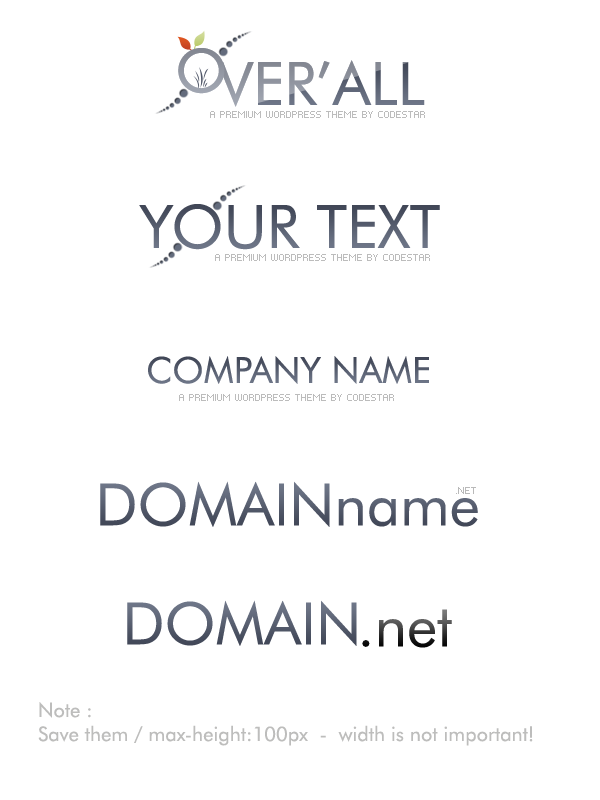
<style>
.page{position:relative;width:600px;height:800px;background:#ffffff}
.page>*{position:absolute;margin:0}
.t1{font:60px "FuturaBT-Book";color:#9296a1}
.t2{font:60px "FuturaBT-Book"}
.t3{font:8px "PFTempestaSeven";color:#bcbcbc}
.t4{font:60px "FuturaBT-Book";color:#545b6c}
.t5{font:36px "FuturaBT-Book";color:#585f70}
.t6{font:58.5px "FuturaBT-Book";color:#545b6c}
.t7{font:7.9px "PFTempestaSeven";color:#b9b9b9}
.t8{font:58.5px "FuturaBT-Book";color:#575e6f}
.t9{font:58.5px "FuturaBT-Book"}
.t10{font:20px "FuturaBT-Book";color:#bdbdbc}
</style>
<div class="page">
<p class="t1" style="left:178px;top:48px;width:47px;height:46px">O</p>
<p class="t2" style="left:217px;top:60px;width:208px;height:47px">VER’ALL</p>
<p class="t3" style="left:210px;top:111px;width:215px;height:7px">A PREMIUM WORDPRESS THEME BY CODESTAR</p>
<p class="t4" style="left:139px;top:204px;width:301px;height:46px">YOUR TEXT</p>
<p class="t3" style="left:215px;top:254px;width:215px;height:7px">A PREMIUM WORDPRESS THEME BY CODESTAR</p>
<p class="t5" style="left:148px;top:356px;width:281px;height:28px">COMPANY NAME</p>
<p class="t3" style="left:179px;top:394px;width:215px;height:7px">A PREMIUM WORDPRESS THEME BY CODESTAR</p>
<p class="t6" style="left:100px;top:481px;width:378px;height:46px">DOMAINname</p>
<p class="t7" style="left:456px;top:487px;width:20px;height:7px">.NET</p>
<p class="t8" style="left:127px;top:600px;width:230px;height:46px">DOMAIN</p>
<p class="t9" style="left:362px;top:609px;width:90px;height:39px">.net</p>
<p class="t10" style="left:38px;top:702px;width:495px;height:44px">Note : <br>Save them / max-height:100px  -  width is not important!</p>
</div>
